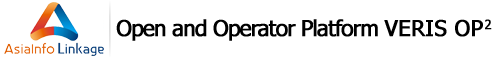
<style>
.page{position:relative;width:500px;height:58px;background:#ffffff}
.page>*{position:absolute;margin:0}
.t1{font:22px "Tahoma";letter-spacing:-0.05em;color:#000000;font-weight:bold}
.t2{font:22px "Tahoma";color:#000000;font-weight:bold}
.t3{font:22px "Tahoma";letter-spacing:0.05em;color:#000000;font-weight:bold}
</style>
<div class="page">
<p class="t1" style="left:116px;top:19px;width:376px;height:22px">Open and Operator Platform <span class="t2">VERIS O</span><span class="t3">P2</span></p>
</div>
